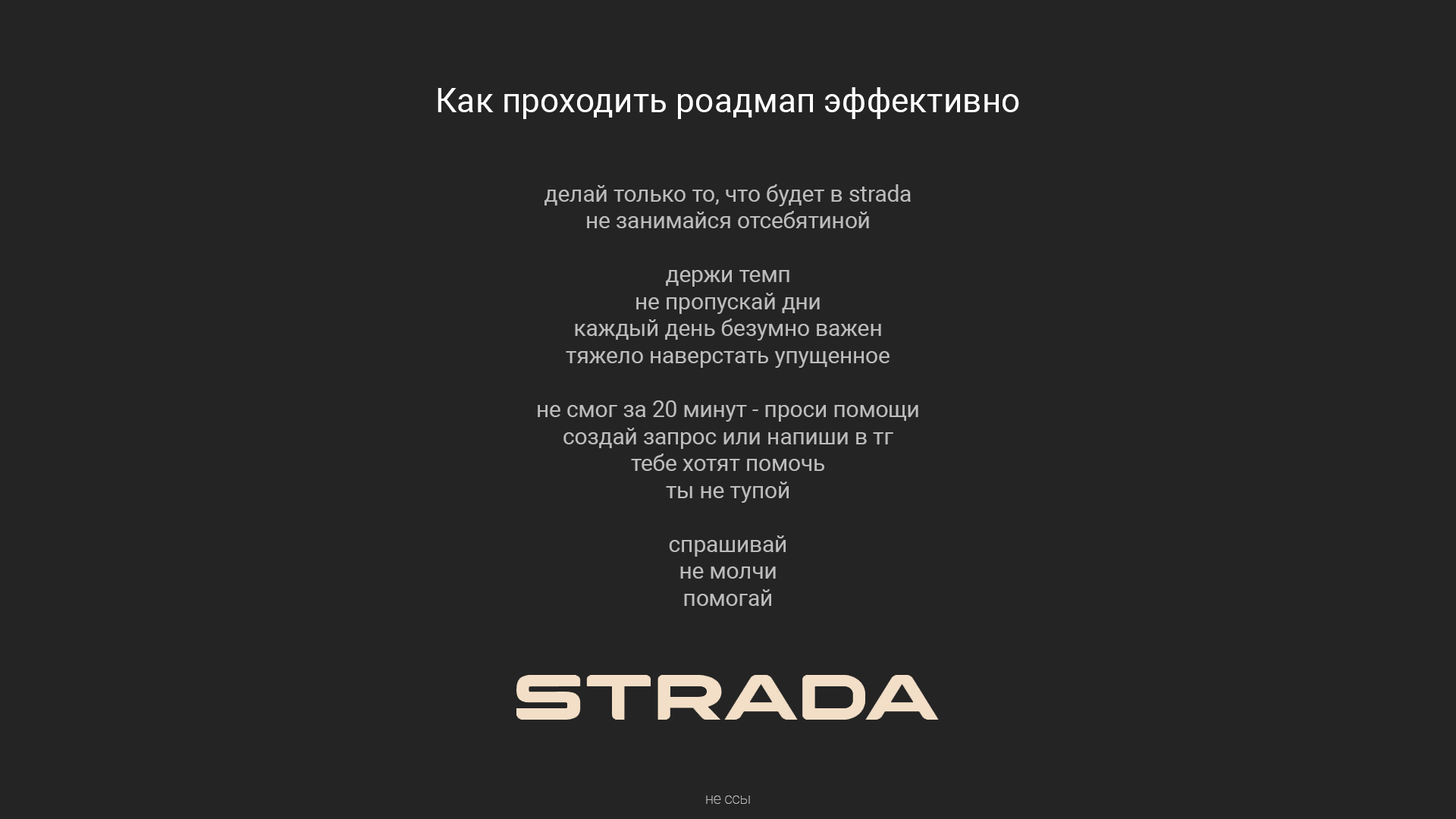
<style>
.page{position:relative;width:1456px;height:819px;background:#242424}
.page>*{position:absolute;margin:0}
.t1{font:33.7px "Roboto-Regular";color:#ffffff}
.t2{font:9.1px "Roboto-Regular";color:#bcbcbc}
.t3{font:15px "Roboto-Thin";color:#bcbcbc}
</style>
<div class="page">
<p class="t1" style="left:438px;top:87px;width:581px;height:32px">Как проходить роадмап эффективно</p>
<p class="t2" style="left:538px;top:184px;width:380px;height:422px;text-align:center">делай только то, что будет в strada<br>не занимайся отсебятиной<br><br>держи темп<br>не пропускай дни<br>каждый день безумно важен <br>тяжело наверстать упущенное<br><br>не смог за 20 минут - проси помощи<br>создай запрос или напиши в тг<br>тебе хотят помочь<br>ты не тупой<br><br>спрашивай<br>не молчи<br>помогай</p>
<p class="t3" style="left:706px;top:795px;width:44px;height:9px">не ссы</p>
</div>
